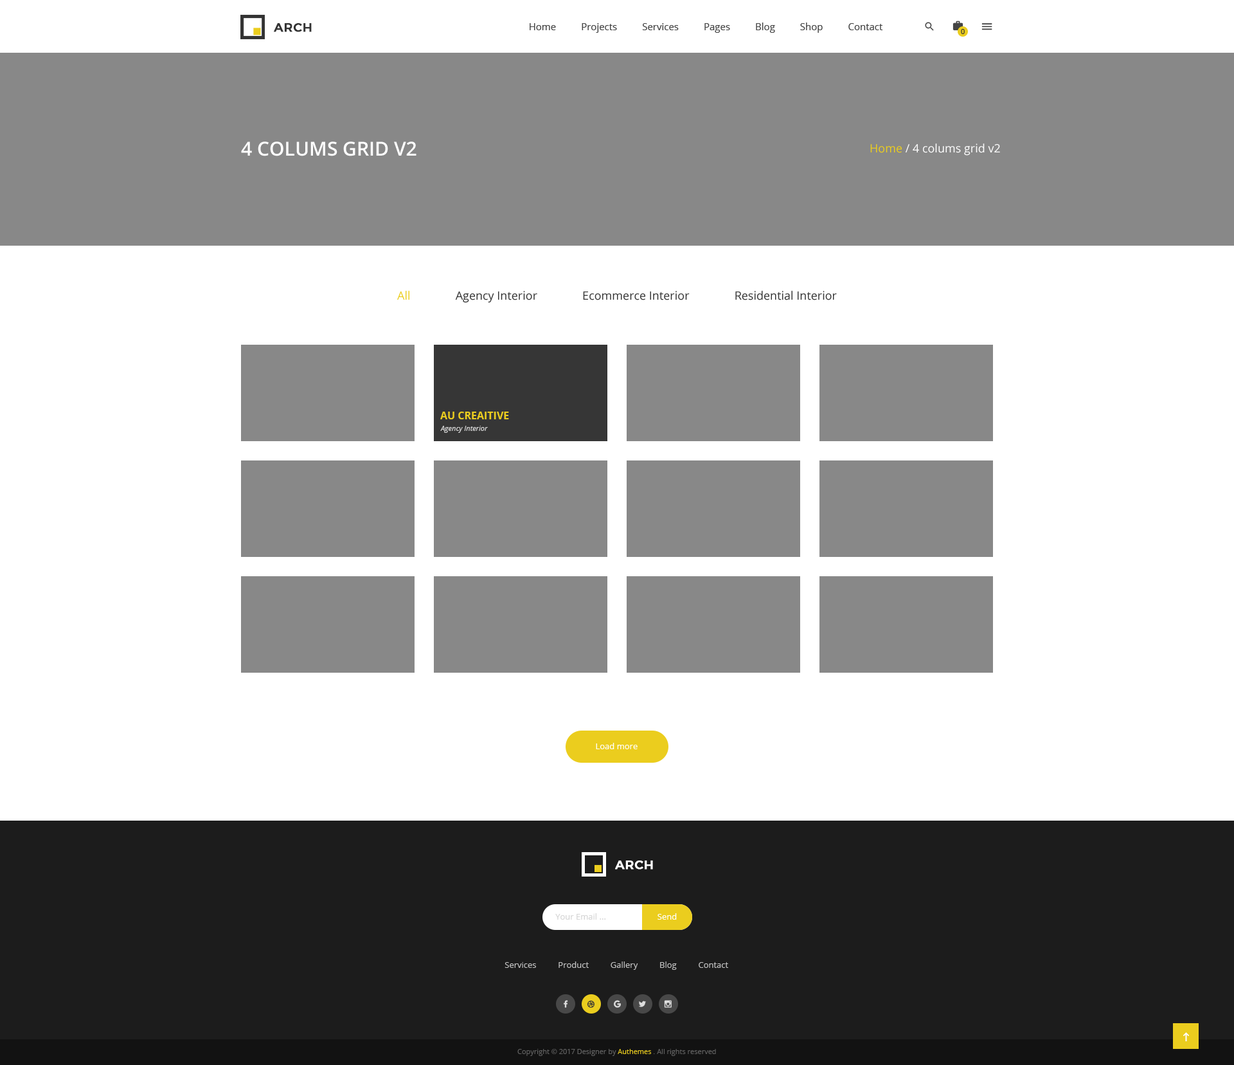
<style>
.page{position:relative;width:1234px;height:1065px;background:#ffffff}
.page>*{position:absolute;margin:0}
.t1{font:12.2px "Montserrat-Medium";letter-spacing:0.025em;color:#333333;text-transform:uppercase;font-weight:bold}
.t2{font:9.6px "OpenSans";color:#444444}
.t3{font:7.1px "OpenSans";color:#333333}
.t4{font:19.3px "OpenSans-Semibold";color:#ffffff;text-transform:uppercase}
.t5{font:11.6px "OpenSans";color:#ffffff}
.t6{font:11.6px "OpenSans";color:#ebcd1e}
.t7{font:11.6px "OpenSans";color:#333333}
.t8{font:10.3px "OpenSans-Bold";color:#ebcd1e;text-transform:uppercase}
.t9{font:7.1px "OpenSans-Italic";color:#d5d5d5}
.t10{font:8.4px "OpenSans";color:#ffffff}
.t11{font:12.2px "Montserrat-Medium";letter-spacing:0.025em;color:#ffffff;text-transform:uppercase;font-weight:bold}
.t12{font:8.4px "OpenSans";color:#d6d6d6}
.t13{font:8.4px "OpenSans";color:#c2c2c2}
.t14{font:7.1px "OpenSans";color:#626262}
.t15{font:7.1px "OpenSans";color:#ebcd1e}
</style>
<div class="page">
<p class="t1" style="left:274px;top:23px;width:38px;height:9px">arch</p>
<p class="t2" style="left:530px;top:22px;width:353px;height:11px">Home          Projects          Services          Pages          Blog          Shop          Contact</p>
<p class="t3" style="left:961px;top:29px;width:4px;height:5px">0</p>
<p class="t4" style="left:241px;top:141px;width:176px;height:15px">4 colums grid v2</p>
<p class="t5" style="left:870px;top:143px;width:130px;height:13px"><span class="t6">Home</span> / 4 colums grid v2</p>
<p class="t7" style="left:397px;top:291px;width:440px;height:12px"><span class="t6">All</span>               Agency Interior               Ecommerce Interior               Residential Interior</p>
<p class="t8" style="left:440px;top:411px;width:69px;height:8px">Au creaitive</p>
<p class="t9" style="left:440px;top:426px;width:48px;height:7px">Agency Interior</p>
<p class="t10" style="left:596px;top:742px;width:42px;height:7px">Load more</p>
<p class="t11" style="left:615px;top:860px;width:38px;height:9px">arch</p>
<p class="t12" style="left:555px;top:913px;width:51px;height:6px">Your Email ...</p>
<p class="t10" style="left:658px;top:913px;width:19px;height:6px">Send</p>
<p class="t13" style="left:505px;top:961px;width:223px;height:8px">Services          Product          Gallery          Blog          Contact</p>
<p class="t14" style="left:518px;top:1048px;width:198px;height:8px">Copyright © 2017 Designer by <span class="t15">Authemes </span>. All rights reserved</p>
</div>
